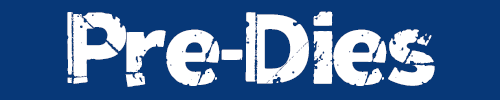
<style>
.page{position:relative;width:500px;height:100px;background:#073878}
.page>*{position:absolute;margin:0}
.t1{font:66px "321Perfect";color:#ffffff}
</style>
<div class="page">
<p class="t1" style="left:67px;top:11px;width:368px;height:76px">Pre-Dies</p>
</div>
